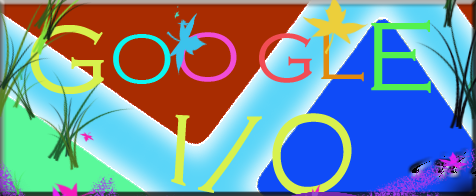
<style>
.page{position:relative;width:476px;height:196px}
.page>*{position:absolute;margin:0}
.t1{font:100px "CopperplateGothic-Light";color:#d8f14d}
.t2{font:72px "CopperplateGothic-Light";color:#0df5f2}
.t3{font:72px "CopperplateGothic-Light";color:#f14dd8}
.t4{font:72px "CopperplateGothic-Light";color:#f14d54}
.t5{font:72px "CopperplateGothic-Light";color:#e28a0d}
</style>
<div class="page">
<p class="t1" style="left:30px;top:25px;width:74px;height:69px">G</p>
<p class="t2" style="left:113px;top:34px;width:58px;height:50px">O</p>
<p class="t3" style="left:179px;top:32px;width:58px;height:50px">O</p>
<p class="t4" style="left:259px;top:33px;width:53px;height:50px">G</p>
<p class="t5" style="left:321px;top:31px;width:43px;height:51px">L</p>
<p class="t1" style="left:171px;top:113px;width:181px;height:83px">I/O</p>
</div>
